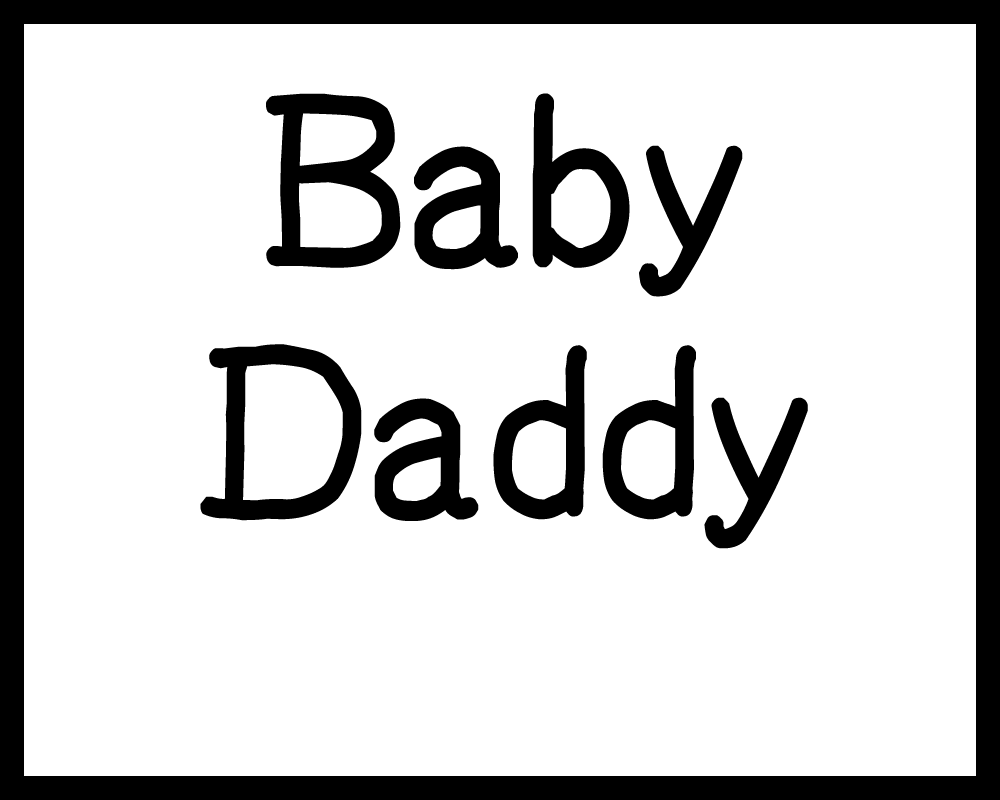
<style>
.page{position:relative;width:1000px;height:800px;background:#ffffff}
.page>*{position:absolute;margin:0}
.t1{font:231px "YOzFontN-ProN-R";letter-spacing:0.03em;color:#000000;font-weight:bold;scale:0.91 1}
</style>
<div class="page">
<p class="t1" style="left:200px;top:93px;width:608px;height:456px;text-align:center">Baby<br>Daddy</p>
</div>
